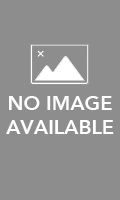
<style>
.page{position:relative;width:120px;height:200px;background:#8d8d8d}
.page>*{position:absolute;margin:0}
.t1{font:20px "Avenir-Heavy";color:#ffffff}
</style>
<div class="page">
<p class="t1" style="left:6px;top:96px;width:108px;height:38px;text-align:center">NO IMAGE<br>AVAILABLE</p>
</div>
